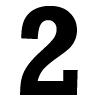
<style>
.page{position:relative;width:100px;height:100px;background:#ffffff}
.page>*{position:absolute;margin:0}
.t1{font:129.9px "Rockwell-Bold";color:#000000}
</style>
<div class="page">
<p class="t1" style="left:20px;top:6px;width:58px;height:89px">2</p>
</div>
